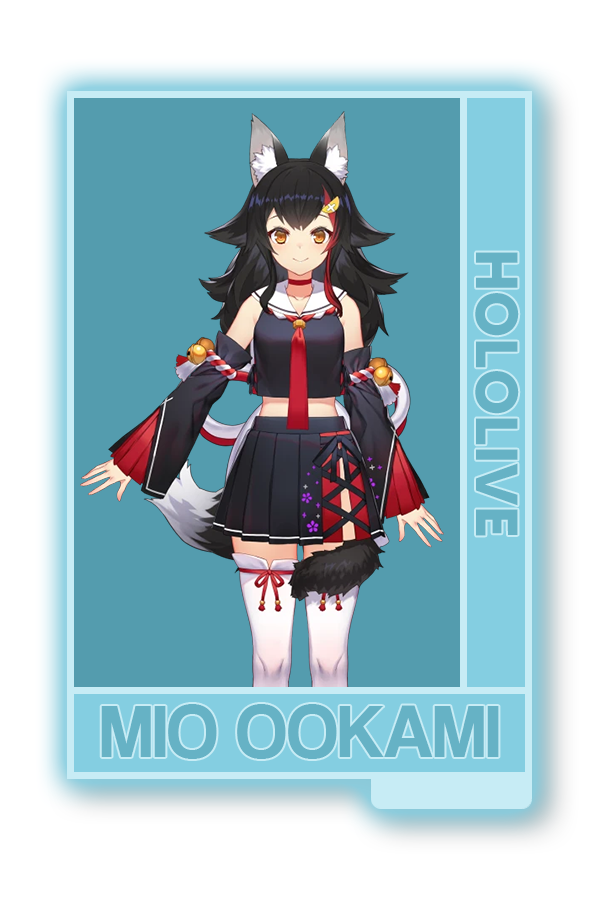
<style>
.page{position:relative;width:600px;height:900px;background:#549cae}
.page>*{position:absolute;margin:0}
.t1{font:59.2px "MADETOMMY-Bold";color:#66b2c5}
.t2{font:76.2px "CoolveticaRg-Regular";color:#66b2c5}
</style>
<div class="page">
<p class="t1" style="left:475px;top:252px;width:44px;height:284px;rotate:90deg">HOLOLIVE</p>
<p class="t2" style="left:101px;top:704px;width:398px;height:55px">MIO OOKAMI</p>
</div>
